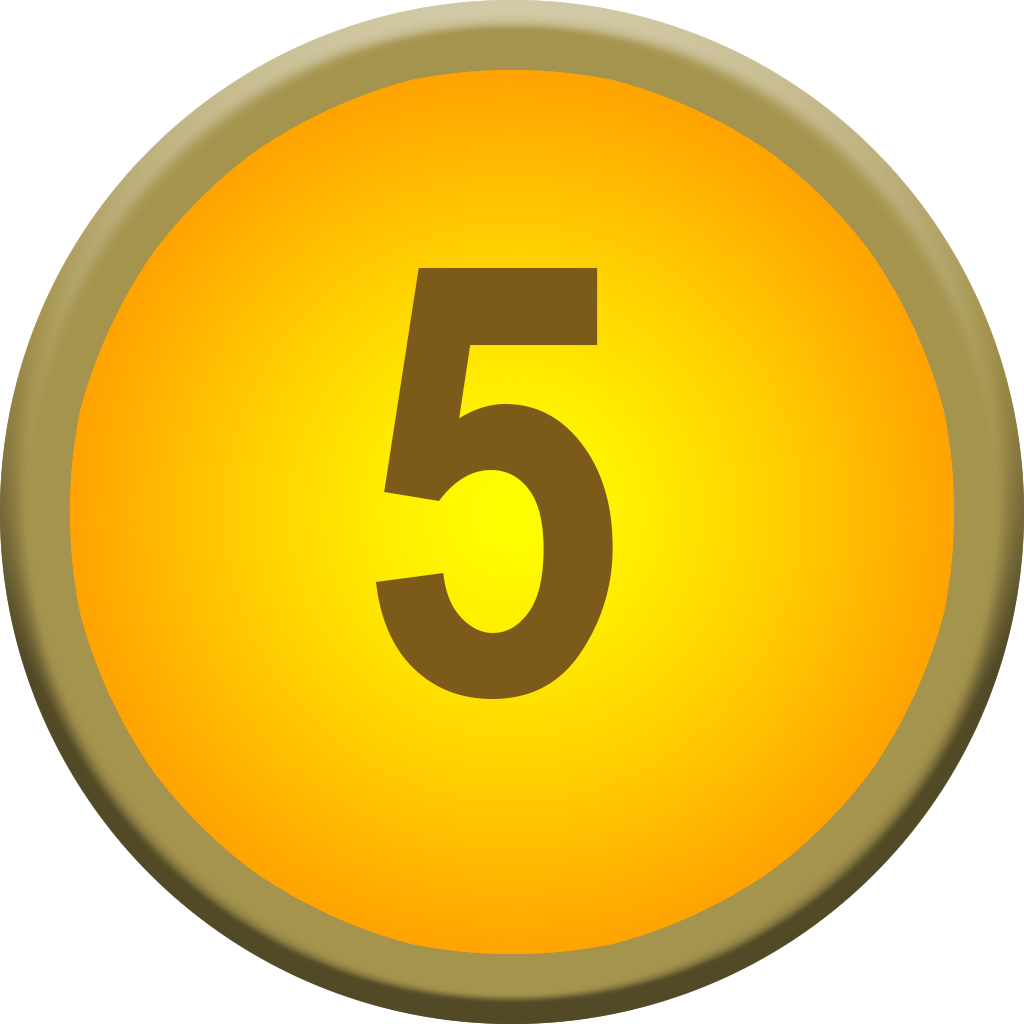
<style>
.page{position:relative;width:1024px;height:1024px;background:#ffffff}
.page>*{position:absolute;margin:0}
.t1{font:600px "ArialNarrow-Bold";color:#7c5a19}
</style>
<div class="page">
<p class="t1" style="left:375px;top:268px;width:238px;height:431px">5</p>
</div>
